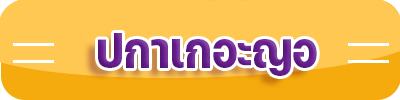
<style>
.page{position:relative;width:400px;height:100px;background:#ffc853}
.page>*{position:absolute;margin:0}
.t1{font:50px "FCIconicNoncommercial-BoldCondensed";color:#681d8f}
</style>
<div class="page">
<p class="t1" style="left:98px;top:33px;width:219px;height:43px">ปกาเกอะญอ</p>
</div>
